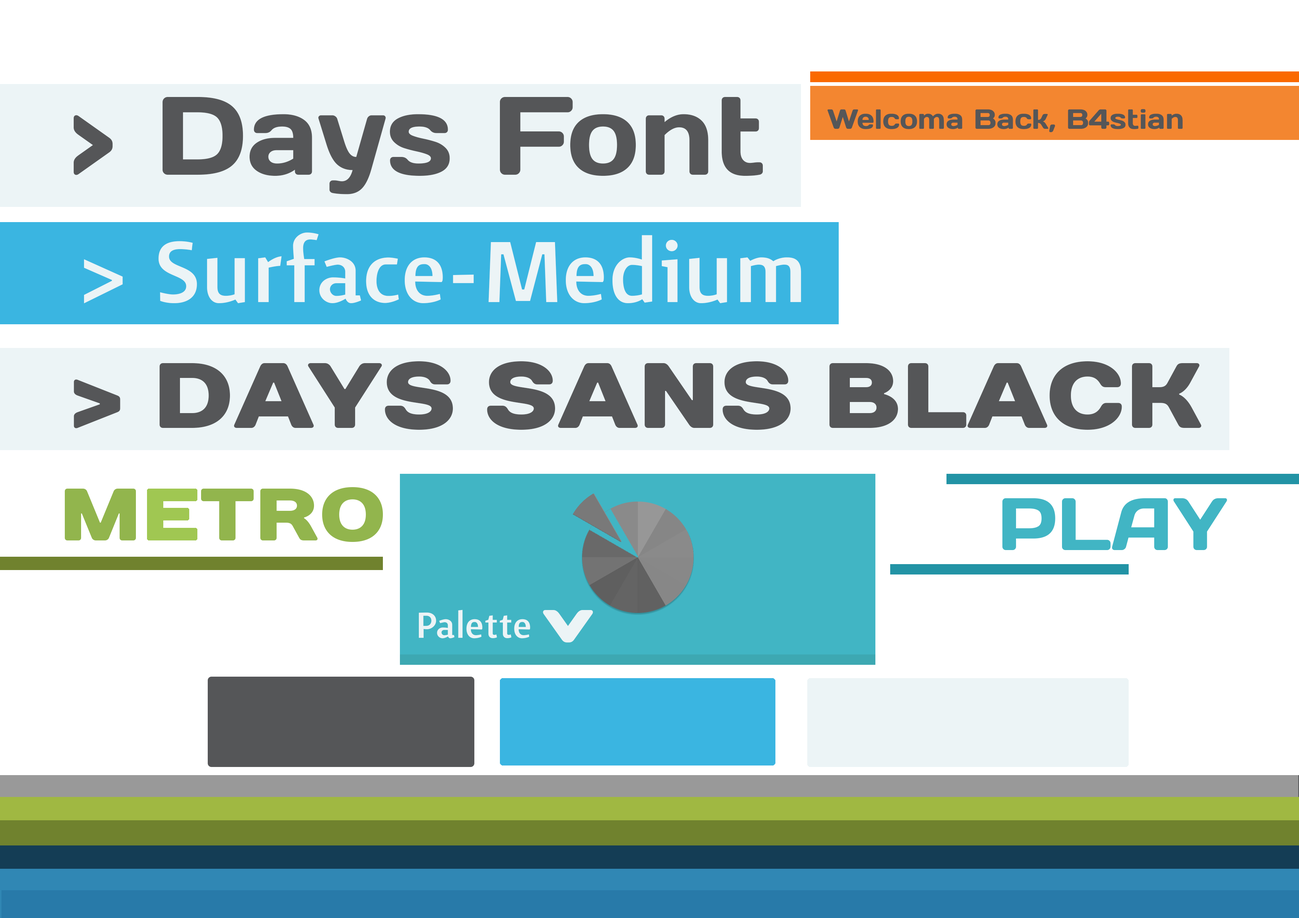
<style>
.page{position:relative;width:1299px;height:918px;background:#ffffff}
.page>*{position:absolute;margin:0}
.t1{font:111.1px "Days";color:#555658}
.t2{font:27.8px "Days";color:#555658}
.t3{font:111.1px "Surface-Medium";color:#ecf4f6}
.t4{font:92.6px "DaysSansBlack";color:#555658}
.t5{font:46.3px "Surface-Medium";color:#ecf4f6}
.t6{font:92.7px "Days";color:#ecf4f6}
</style>
<div class="page">
<p class="t1" style="left:74px;top:97px;width:689px;height:97px">&gt; Days Font</p>
<p class="t2" style="left:827px;top:109px;width:355px;height:23px">Welcoma Back, B4stian</p>
<p class="t3" style="left:84px;top:232px;width:717px;height:72px">&gt; Surface-Medium</p>
<p class="t4" style="left:74px;top:361px;width:1127px;height:69px">&gt; Days Sans Black</p>
<p class="t5" style="left:419px;top:610px;width:111px;height:29px">Palette</p>
<p class="t6" style="left:543px;top:610px;width:50px;height:33px;rotate:90deg">&gt;</p>
</div>
